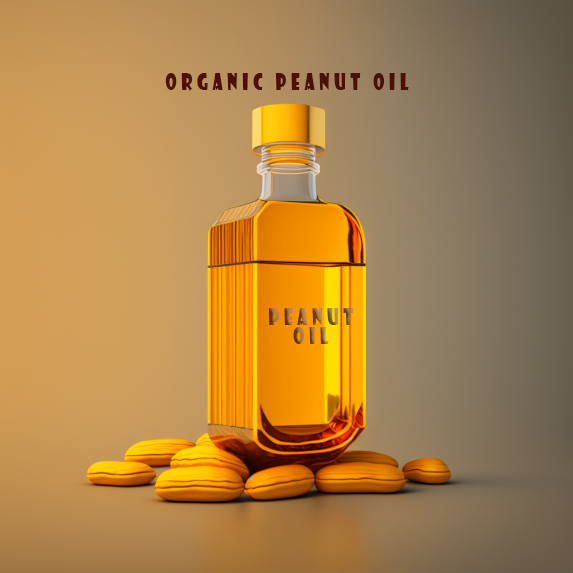
<style>
.page{position:relative;width:573px;height:573px}
.page>*{position:absolute;margin:0}
.t1{font:22.4px "ShowcardGothic-Reg";letter-spacing:0.3em;color:#4c1102;scale:0.71 1}
</style>
<div class="page">
<p class="t1" style="left:165px;top:73px;width:244px;height:18px">Organic Peanut Oil</p>
</div>
